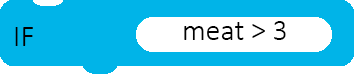
<style>
.page{position:relative;width:354px;height:74px;background:#00b4e8}
.page>*{position:absolute;margin:0}
.t1{font:30px "Calibri-Light";color:#000000}
</style>
<div class="page">
<p class="t1" style="left:15px;top:27px;width:18px;height:19px">IF</p>
<p class="t1" style="left:184px;top:21px;width:102px;height:19px">meat &gt; 3</p>
</div>
